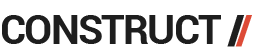
<style>
.page{position:relative;width:255px;height:54px;background:#ffffff}
.page>*{position:absolute;margin:0}
.t1{font:40.6px "Roboto-Bold";letter-spacing:-0.05em;color:#1e1e1e;text-transform:uppercase}
.t2{font:40.6px "Roboto-Black";letter-spacing:-0.2em;color:#1e1e1e;text-transform:uppercase}
.t3{font:40.6px "Roboto-Bold";letter-spacing:-0.2em;color:#dd4b37;text-transform:uppercase}
</style>
<div class="page">
<p class="t1" style="left:2px;top:15px;width:250px;height:32px">CONSTRUCT <span class="t2">/</span><span class="t3">/</span></p>
</div>
